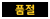
<style>
.page{position:relative;width:50px;height:19px;background:#000000}
.page>*{position:absolute;margin:0}
.t1{font:12px "2002L";color:#ffce21}
</style>
<div class="page">
<p class="t1" style="left:15px;top:4px;width:20px;height:11px">품절</p>
</div>
